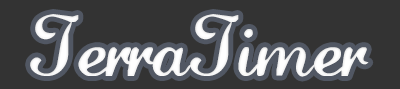
<style>
.page{position:relative;width:400px;height:89px;background:#333333}
.page>*{position:absolute;margin:0}
.t1{font:62px "LaurenScript";color:#ffffff}
</style>
<div class="page">
<p class="t1" style="left:30px;top:14px;width:339px;height:63px">TerraTimer</p>
</div>
